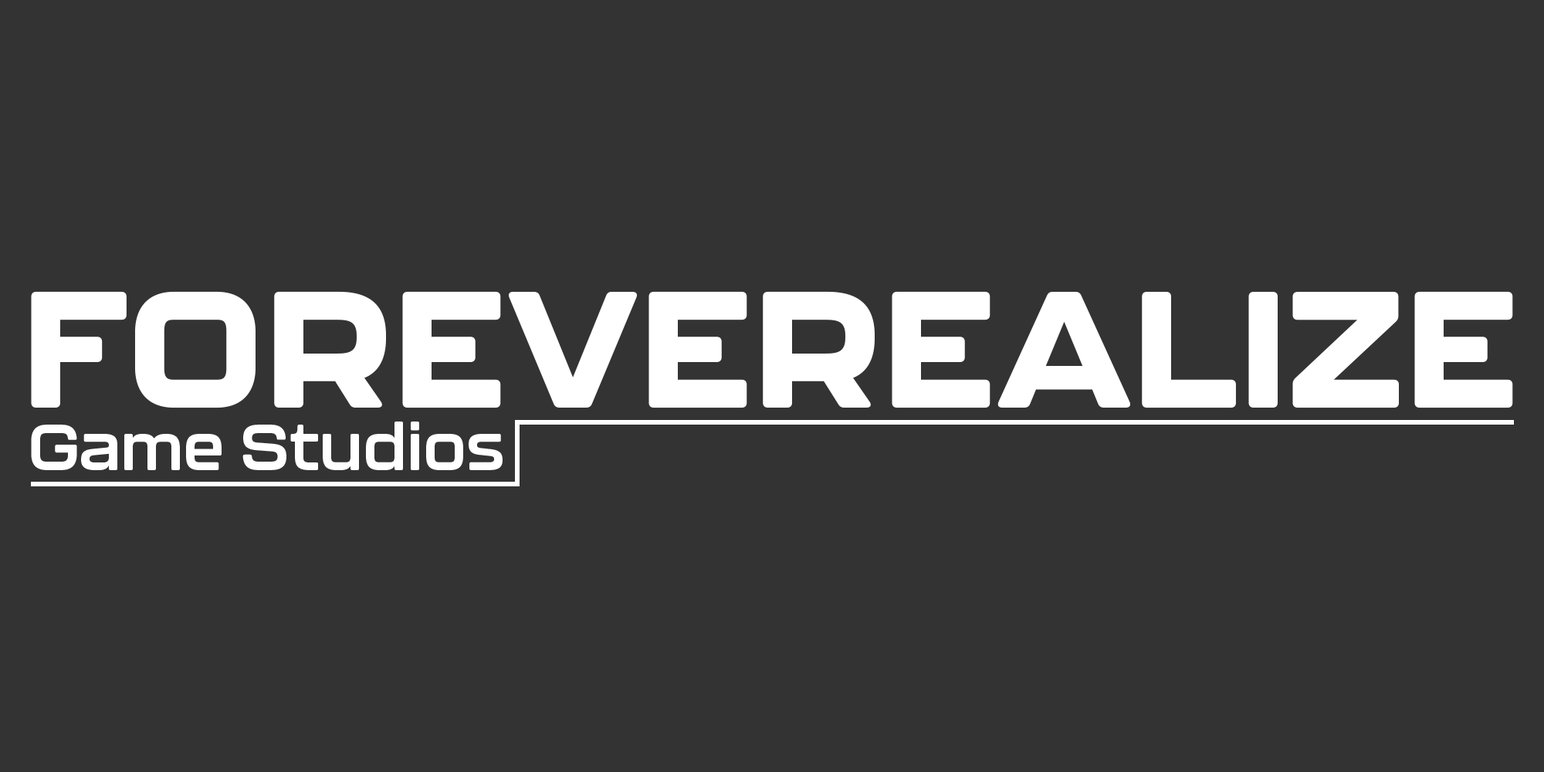
<style>
.page{position:relative;width:1544px;height:772px;background:#333333}
.page>*{position:absolute;margin:0}
.t1{font:164.1px "Kallisto-Heavy";color:#ffffff}
.t2{font:64.6px "Kallisto-Bold";color:#ffffff}
</style>
<div class="page">
<p class="t1" style="left:31px;top:291px;width:1482px;height:117px">FOREVEREALIZE</p>
<p class="t2" style="left:31px;top:422px;width:472px;height:48px">Game Studios</p>
</div>
